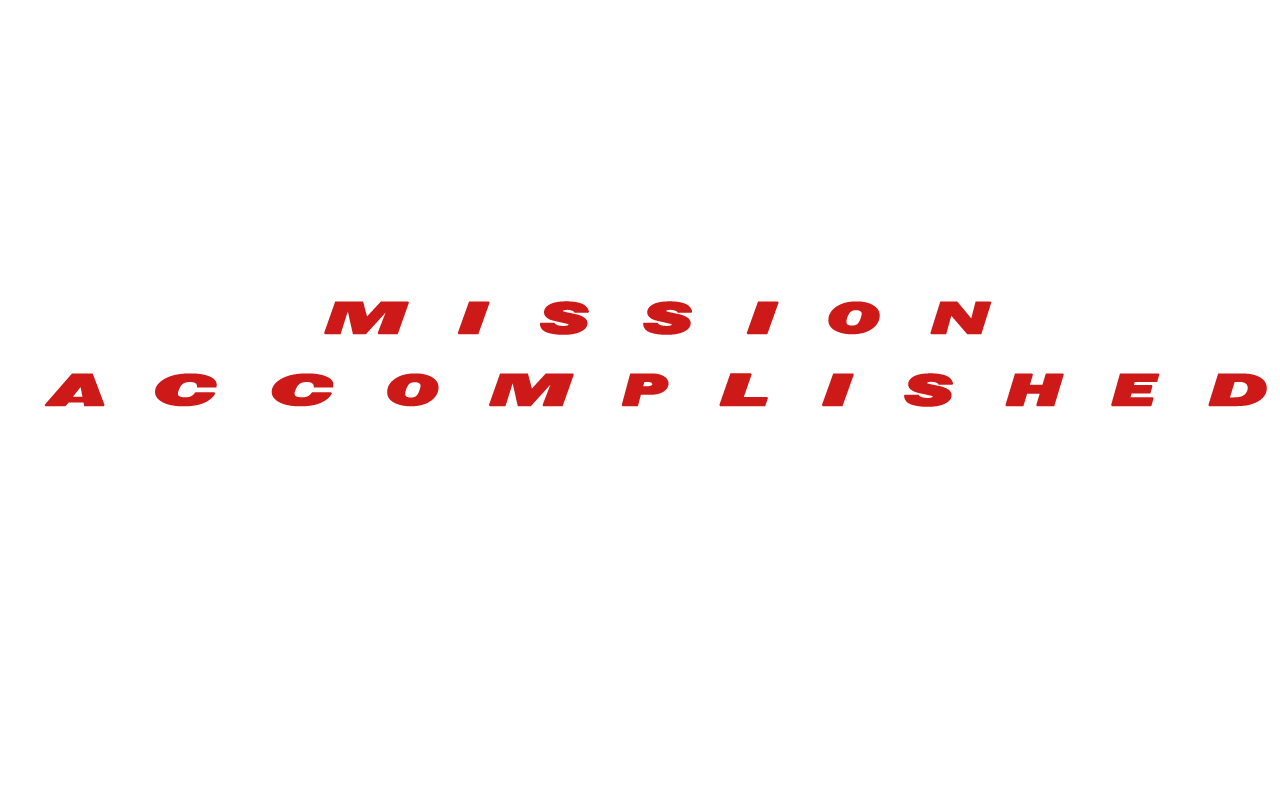
<style>
.page{position:relative;width:1280px;height:800px;background:#ffffff}
.page>*{position:absolute;margin:0}
.t1{font:60px/72px "Tactical-Espionage-Action";letter-spacing:0.9em;color:#ce1919;text-transform:uppercase;font-weight:bold}
</style>
<div class="page">
<p class="t1" style="left:44px;top:301px;width:1223px;height:106px;text-align:center">MisSION<br>ACCOMPLISHED</p>
</div>
